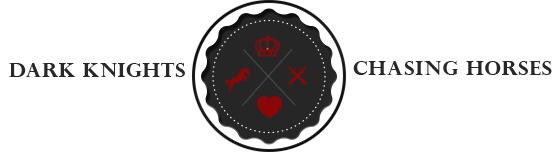
<style>
.page{position:relative;width:552px;height:152px;background:#ffffff}
.page>*{position:absolute;margin:0}
.t1{font:20px "PerpetuaTitlingMT-Bold";letter-spacing:0.04em;color:#282828}
.t2{font:20px "PerpetuaTitlingMT-Bold";letter-spacing:0.06em;color:#282828}
</style>
<div class="page">
<p class="t1" style="left:9px;top:63px;width:176px;height:14px">Dark Knights</p>
<p class="t2" style="left:353px;top:61px;width:199px;height:14px">Chasing <span class="t1">Horses</span></p>
</div>
